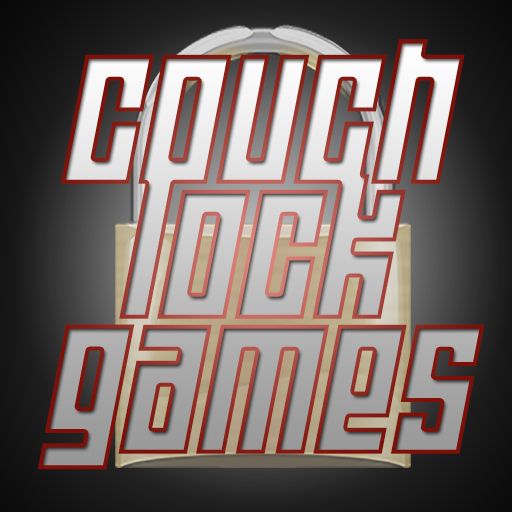
<style>
.page{position:relative;width:512px;height:512px}
.page>*{position:absolute;margin:0}
.t1{font:172px/135px "WideawakeBlack";letter-spacing:-0.01em;scale:1.1 1}
</style>
<div class="page">
<p class="t1" style="left:38px;top:39px;width:447px;height:431px;text-align:center">Couch<br>Lock<br>games</p>
</div>
